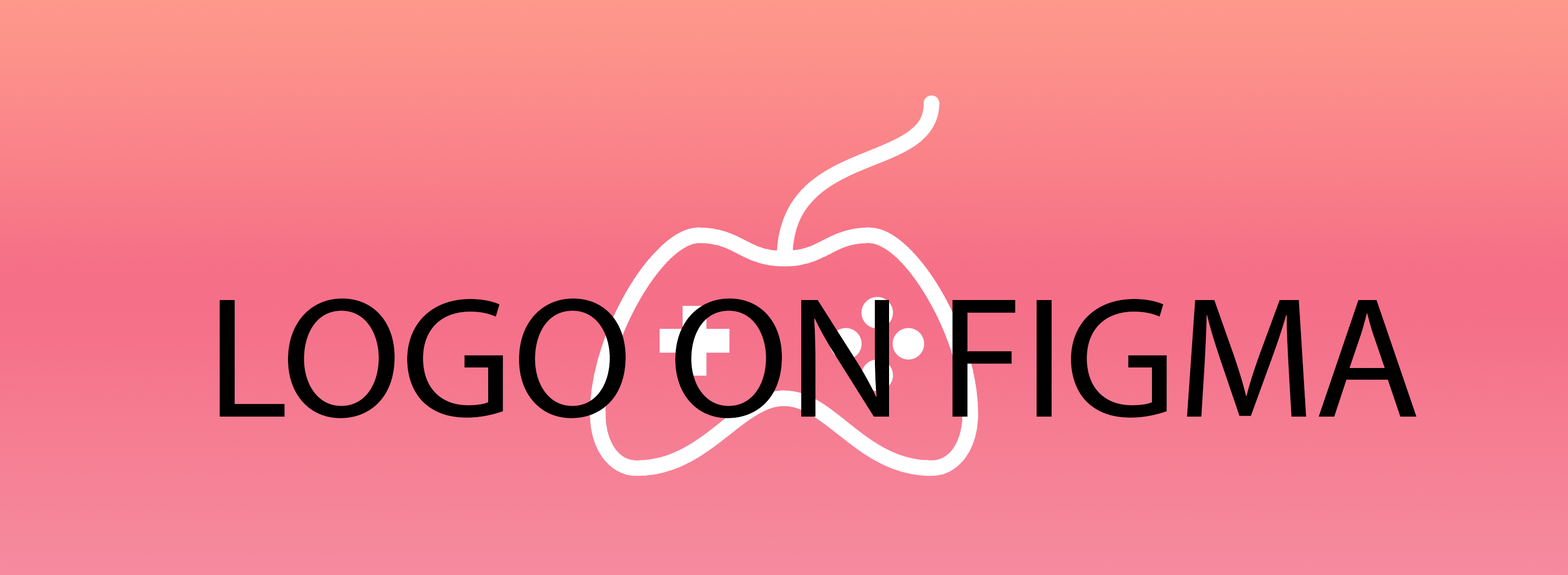
<style>
.page{position:relative;width:1568px;height:575px}
.page>*{position:absolute;margin:0}
.t1{font:173.3px "MyriadPro-Regular";color:#000000}
</style>
<div class="page">
<p class="t1" style="left:220px;top:298px;width:1196px;height:120px">LOGO ON FIGMA</p>
</div>
